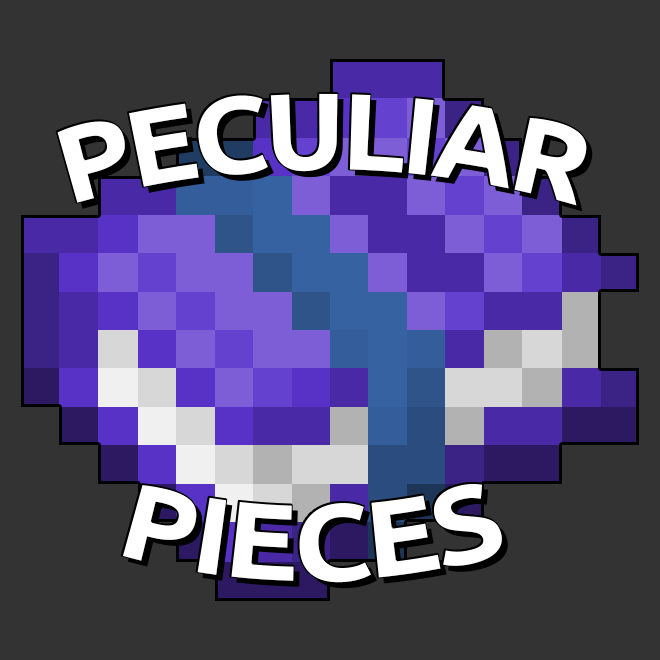
<style>
.page{position:relative;width:660px;height:660px;background:#333333}
.page>*{position:absolute;margin:0}
.t1{font:110px "Ubuntu-Bold";letter-spacing:-0.05em;color:#ffffff}
</style>
<div class="page">
<p class="t1" style="left:56px;top:92px;width:531px;height:114px">PECULIAR</p>
<p class="t1" style="left:121px;top:483px;width:381px;height:100px">PIECES</p>
</div>
